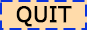
<style>
.page{position:relative;width:87px;height:30px;background:#ffdbaa}
.page>*{position:absolute;margin:0}
.t1{font:21px "Verdana";color:#000000;font-weight:bold}
</style>
<div class="page">
<p class="t1" style="left:16px;top:6px;width:56px;height:21px">QUIT</p>
</div>
